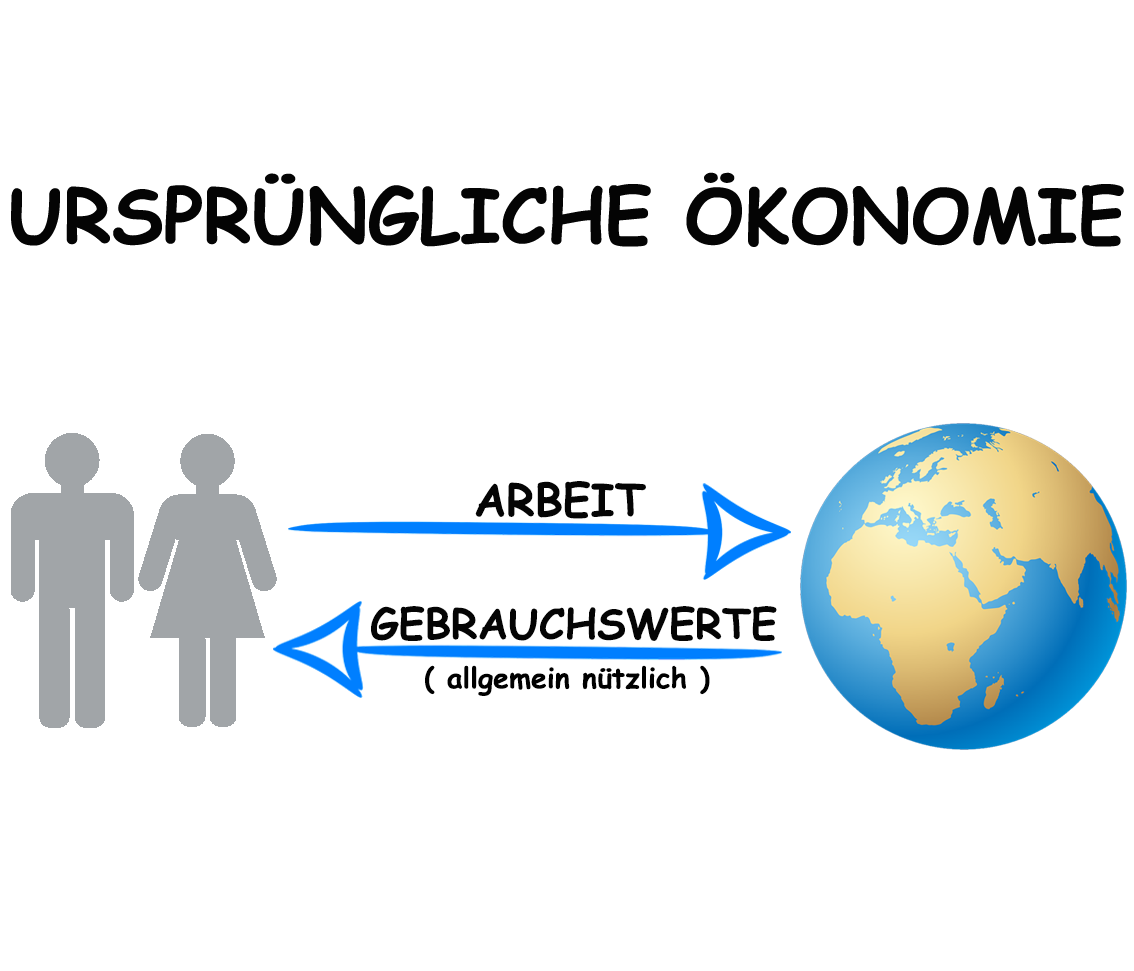
<style>
.page{position:relative;width:1134px;height:971px;background:#ffffff}
.page>*{position:absolute;margin:0}
.t1{font:75px "ComicSansMS-Bold";color:#040404}
.t2{font:44.7px "ComicSansMS-Bold";color:#040404}
.t3{font:41.7px "ComicSansMS-Bold";color:#040404}
.t4{font:28.3px "ComicSansMS-Bold";color:#000000}
</style>
<div class="page">
<p class="t1" style="left:11px;top:172px;width:1113px;height:75px">URSPRÜNGLICHE ÖKONOMIE</p>
<p class="t2" style="left:475px;top:481px;width:171px;height:38px">ARBEIT</p>
<p class="t3" style="left:371px;top:606px;width:406px;height:35px">GEBRAUCHSWERTE</p>
<p class="t4" style="left:425px;top:665px;width:285px;height:31px">( allgemein nützlich )</p>
</div>
